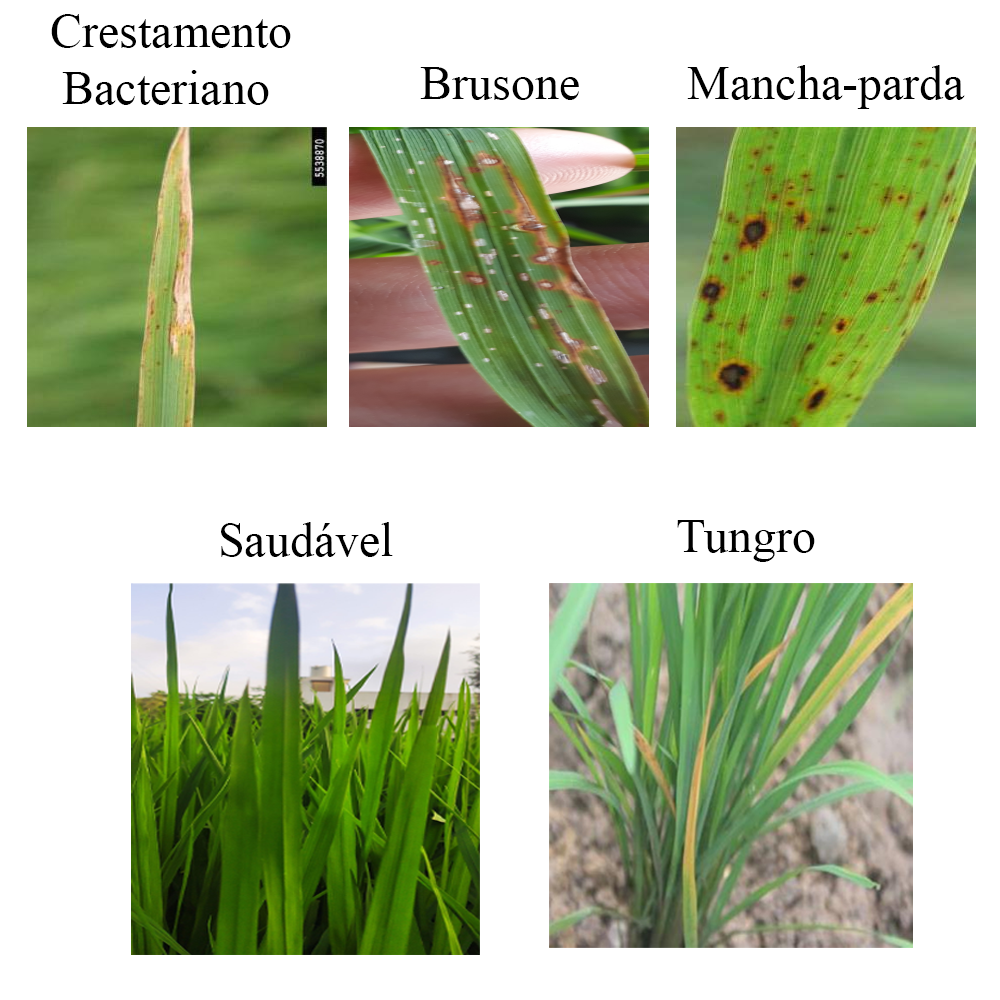
<style>
.page{position:relative;width:1000px;height:1000px;background:#ffffff}
.page>*{position:absolute;margin:0}
.t1{font:48px "TimesNewRomanPSMT";color:#000000}
</style>
<div class="page">
<p class="t1" style="left:51px;top:14px;width:240px;height:91px">Crestamento <br> Bacteriano</p>
<p class="t1" style="left:687px;top:65px;width:278px;height:44px">Mancha-parda</p>
<p class="t1" style="left:420px;top:67px;width:159px;height:33px">Brusone</p>
<p class="t1" style="left:677px;top:520px;width:138px;height:42px">Tungro</p>
<p class="t1" style="left:221px;top:522px;width:172px;height:35px">Saudável</p>
</div>
